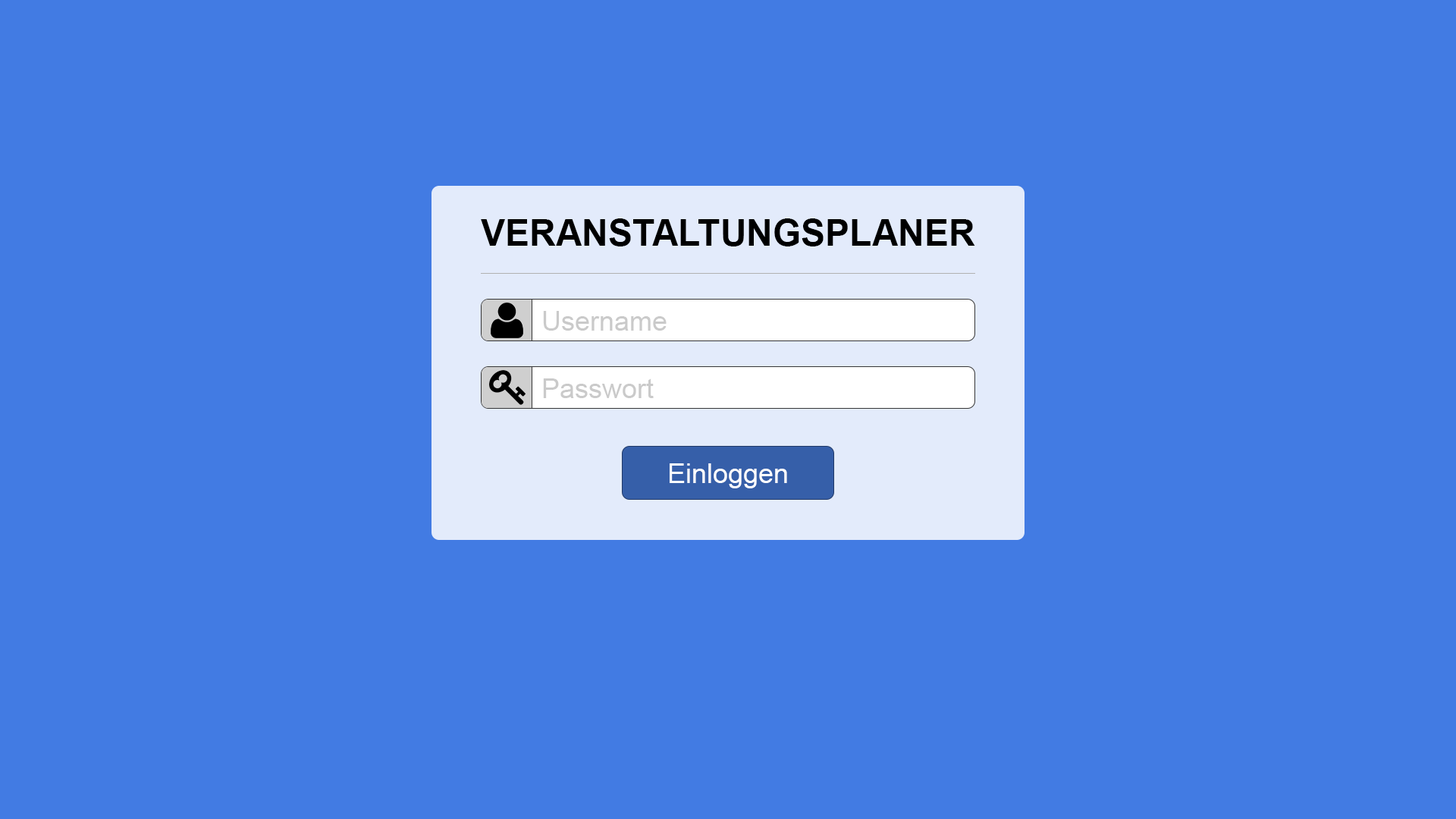
<style>
.page{position:relative;width:1456px;height:819px;background:#427be3}
.page>*{position:absolute;margin:0}
.t1{font:36.4px "Arial-BoldMT";color:#000000}
.t2{font:27.3px "ArialMT";color:#cacaca}
.t3{font:27.3px "ArialMT";color:#ffffff}
</style>
<div class="page">
<p class="t1" style="left:481px;top:218px;width:494px;height:28px">VERANSTALTUNGSPLANER</p>
<p class="t2" style="left:543px;top:311px;width:124px;height:20px">Username</p>
<p class="t2" style="left:543px;top:378px;width:111px;height:20px">Passwort</p>
<p class="t3" style="left:670px;top:463px;width:117px;height:25px">Einloggen</p>
</div>
